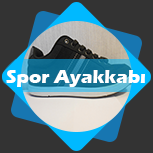
<style>
.page{position:relative;width:153px;height:153px;background:#333333}
.page>*{position:absolute;margin:0}
.t1{font:19.4px "ErasITC-Bold";color:#ffffff}
</style>
<div class="page">
<p class="t1" style="left:6px;top:70px;width:139px;height:17px">Spor Ayakkabı</p>
</div>
